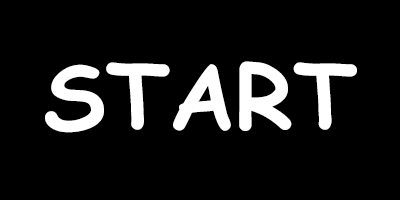
<style>
.page{position:relative;width:400px;height:200px;background:#000000}
.page>*{position:absolute;margin:0}
.t1{font:90.5px "ComicSansMS-Bold";color:#ffffff}
</style>
<div class="page">
<p class="t1" style="left:45px;top:61px;width:312px;height:72px">START</p>
</div>
